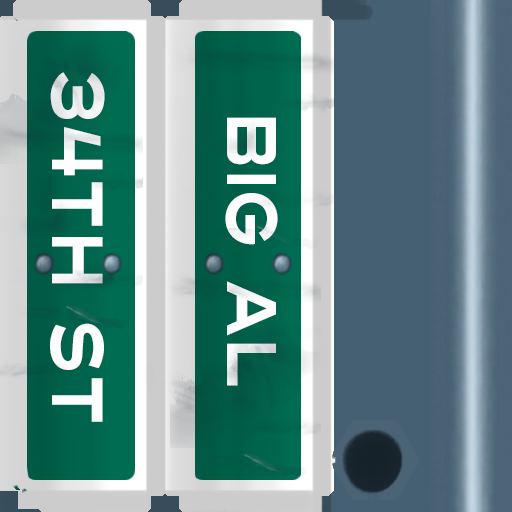
<style>
.page{position:relative;width:512px;height:512px}
.page>*{position:absolute;margin:0}
.t1{font:72px "Turnpike";color:#fefeff;scale:0.75 1}
.t2{font:70px "Turnpike";color:#fefeff;scale:0.75 1}
</style>
<div class="page">
<p class="t1" style="left:50px;top:72px;width:55px;height:350px;rotate:90deg">34th st</p>
<p class="t2" style="left:225px;top:117px;width:53px;height:269px;rotate:90deg">Big Al</p>
</div>
